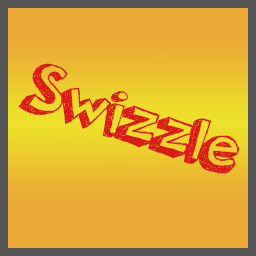
<style>
.page{position:relative;width:256px;height:256px}
.page>*{position:absolute;margin:0}
.t1{font:71.9px "orangejuice";color:#dd1a1a}
</style>
<div class="page">
<p class="t1" style="left:18px;top:63px;width:222px;height:111px;rotate:18deg">Swizzle</p>
</div>
